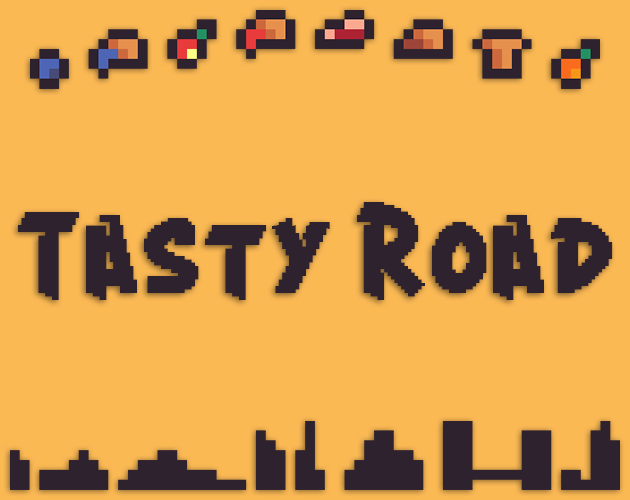
<style>
.page{position:relative;width:630px;height:500px;background:#fbb954}
.page>*{position:absolute;margin:0}
.t1{font:84.8px "Crang";color:#2e222f}
</style>
<div class="page">
<p class="t1" style="left:18px;top:202px;width:595px;height:98px">Tasty Road</p>
</div>
